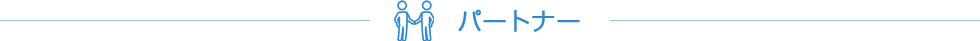
<style>
.page{position:relative;width:980px;height:41px;background:#ffffff}
.page>*{position:absolute;margin:0}
.t1{font:24px "ShinGoPro-Light";color:#2f8ace;font-weight:bold}
</style>
<div class="page">
<p class="t1" style="left:458px;top:9px;width:122px;height:23px">パートナー</p>
</div>
